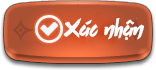
<style>
.page{position:relative;width:156px;height:70px}
.page>*{position:absolute;margin:0}
.t1{font:20px "SVN-LastParadise";color:#ffffff}
</style>
<div class="page">
<p class="t1" style="left:63px;top:18px;width:81px;height:22px">Xác nhận</p>
</div>
